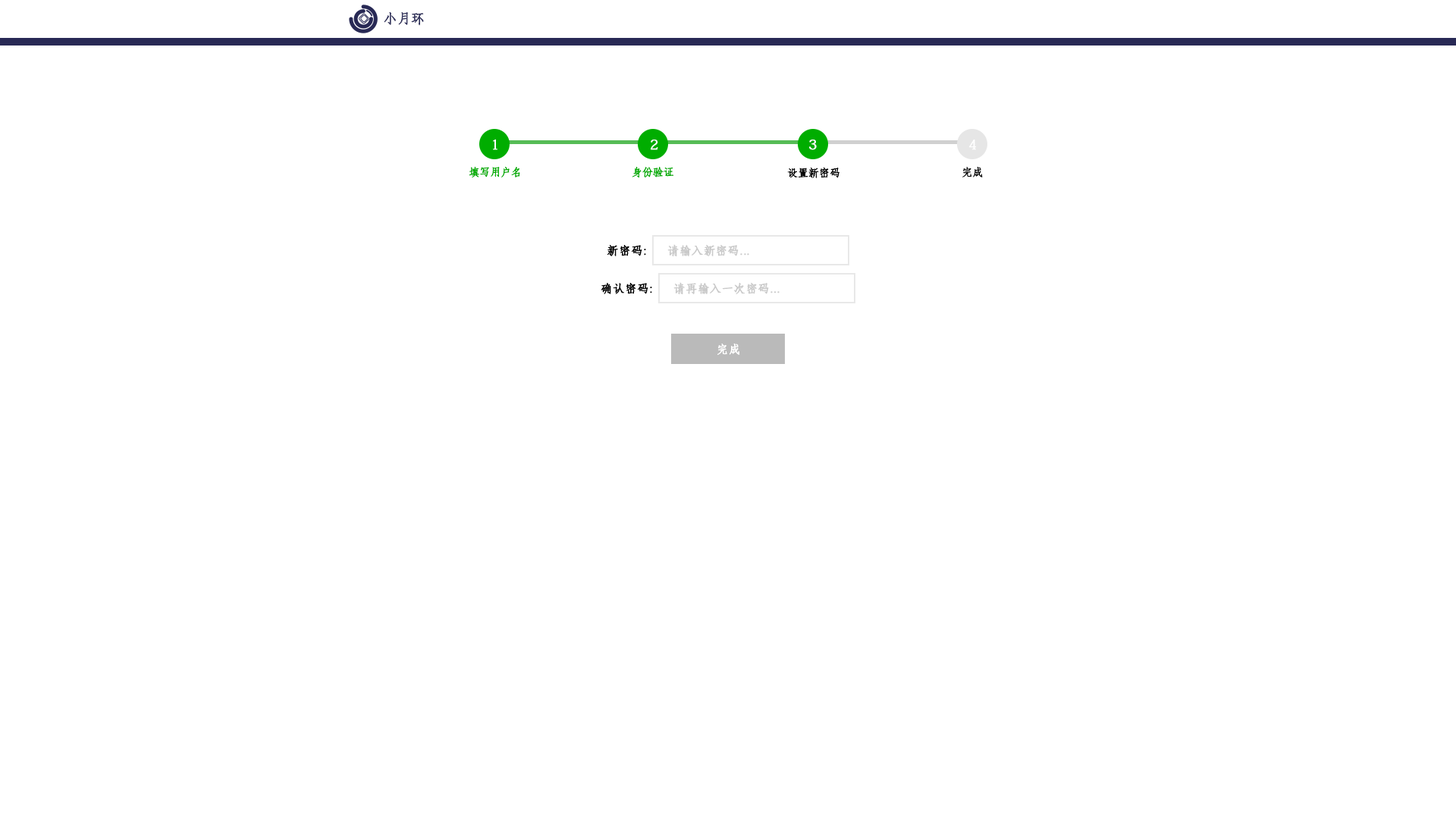
<style>
.page{position:relative;width:1456px;height:819px;background:#ffffff}
.page>*{position:absolute;margin:0}
.t1{font:13.4px "AdobeFangsongStd-Regular";color:#35365f;font-weight:bold}
.t2{font:13.6px "AdobeFangsongStd-Regular";color:#ffffff;font-weight:bold}
.t3{font:10.6px "AdobeFangsongStd-Regular";color:#00ad00;font-weight:bold}
.t4{font:10.6px "AdobeFangsongStd-Regular";color:#010101;font-weight:bold}
.t5{font:10.6px "AdobeFangsongStd-Regular";color:#000000;font-weight:bold}
.t6{font:11.4px "AdobeFangsongStd-Regular";color:#000000;font-weight:bold}
.t7{font:11.4px "AdobeFangsongStd-Regular";color:#cacaca;font-weight:bold}
.t8{font:11.4px "AdobeFangsongStd-Regular";color:#ffffff;font-weight:bold}
</style>
<div class="page">
<p class="t1" style="left:384px;top:12px;width:40px;height:14px">小月环</p>
<p class="t2" style="left:493px;top:139px;width:4px;height:11px">1</p>
<p class="t2" style="left:651px;top:140px;width:7px;height:10px">2</p>
<p class="t2" style="left:809px;top:140px;width:8px;height:10px">3</p>
<p class="t2" style="left:969px;top:140px;width:8px;height:10px">4</p>
<p class="t3" style="left:469px;top:167px;width:51px;height:11px">填写用户名</p>
<p class="t3" style="left:632px;top:167px;width:42px;height:11px">身份验证</p>
<p class="t4" style="left:787px;top:167px;width:52px;height:11px">设置新密码</p>
<p class="t5" style="left:962px;top:167px;width:21px;height:10px">完成</p>
<p class="t6" style="left:607px;top:245px;width:39px;height:11px">新密码:</p>
<p class="t7" style="left:667px;top:244px;width:82px;height:12px">请输入新密码...</p>
<p class="t6" style="left:601px;top:283px;width:51px;height:11px">确认密码:</p>
<p class="t7" style="left:673px;top:282px;width:107px;height:12px">请再输入一次密码...</p>
<p class="t8" style="left:717px;top:344px;width:23px;height:11px">完成</p>
</div>
